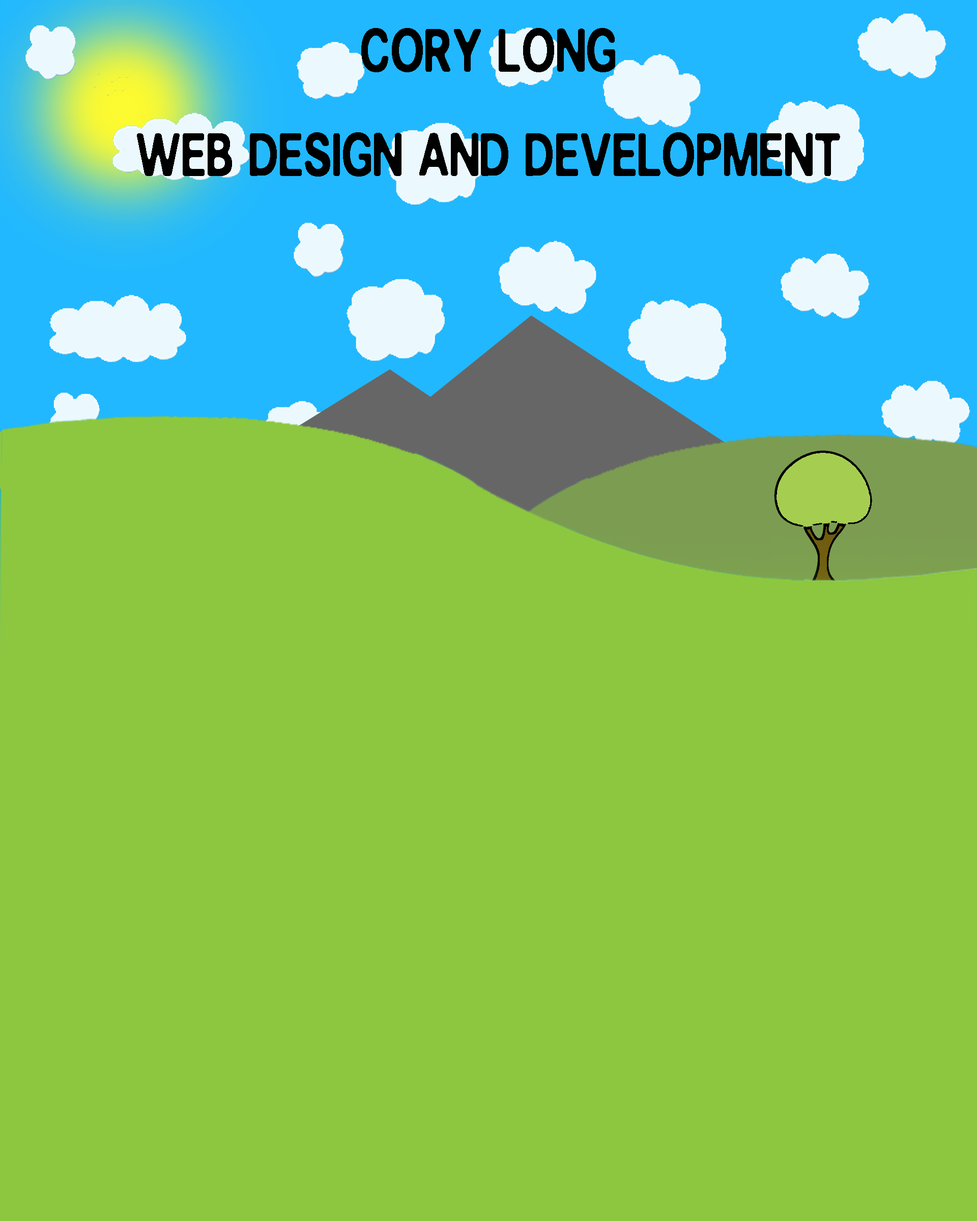
<style>
.page{position:relative;width:977px;height:1221px;background:#8dc73f}
.page>*{position:absolute;margin:0}
.t1{font:91.6px "CHEESEPIZZA";color:#000000;scale:0.8 1}
</style>
<div class="page">
<p class="t1" style="left:361px;top:28px;width:254px;height:44px">Cory Long</p>
<p class="t1" style="left:137px;top:132px;width:703px;height:45px">Web Design and Development</p>
</div>
